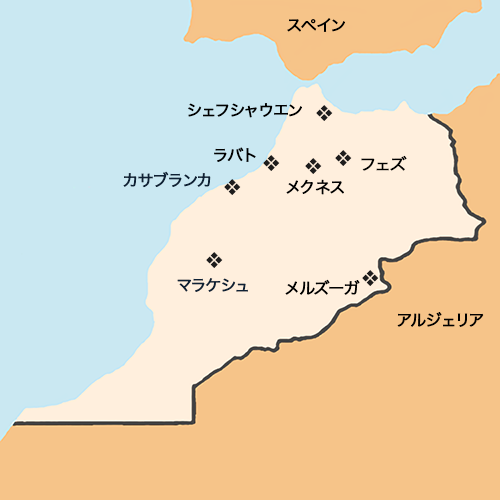
<style>
.page{position:relative;width:500px;height:500px;background:#cae8f2}
.page>*{position:absolute;margin:0}
.t1{font:16px "HiraKakuProN-W3";color:#000000;font-weight:bold}
.t2{font:16px "HiraKakuProN-W3";color:#1e1d1d;font-weight:bold}
.t3{font:16px "HiraKakuProN-W3";color:#000000;font-weight:bold;scale:1.07 1}
.t4{font:16px "HiraKakuProN-W3";color:#0e2135;font-weight:bold}
</style>
<div class="page">
<p class="t1" style="left:287px;top:18px;width:58px;height:14px">スペイン</p>
<p class="t1" style="left:188px;top:103px;width:114px;height:15px">ｼェフシャウエン</p>
<p class="t2" style="left:316px;top:105px;width:17px;height:16px">◆</p>
<p class="t1" style="left:214px;top:147px;width:42px;height:15px">ラバト</p>
<p class="t2" style="left:335px;top:150px;width:17px;height:16px">◆</p>
<p class="t2" style="left:263px;top:155px;width:17px;height:16px">◆</p>
<p class="t2" style="left:305px;top:158px;width:17px;height:16px">◆</p>
<p class="t3" style="left:361px;top:155px;width:46px;height:16px">フェズ</p>
<p class="t4" style="left:123px;top:171px;width:88px;height:17px">カサブランカ</p>
<p class="t2" style="left:224px;top:179px;width:17px;height:16px">◆</p>
<p class="t1" style="left:286px;top:179px;width:58px;height:16px">メクネス</p>
<p class="t2" style="left:206px;top:252px;width:17px;height:16px">◆</p>
<p class="t2" style="left:362px;top:270px;width:17px;height:16px">◆</p>
<p class="t4" style="left:177px;top:278px;width:71px;height:14px">マラケシュ</p>
<p class="t1" style="left:285px;top:279px;width:75px;height:16px">メルズーガ</p>
<p class="t1" style="left:397px;top:312px;width:87px;height:15px">アルジェリア</p>
</div>
